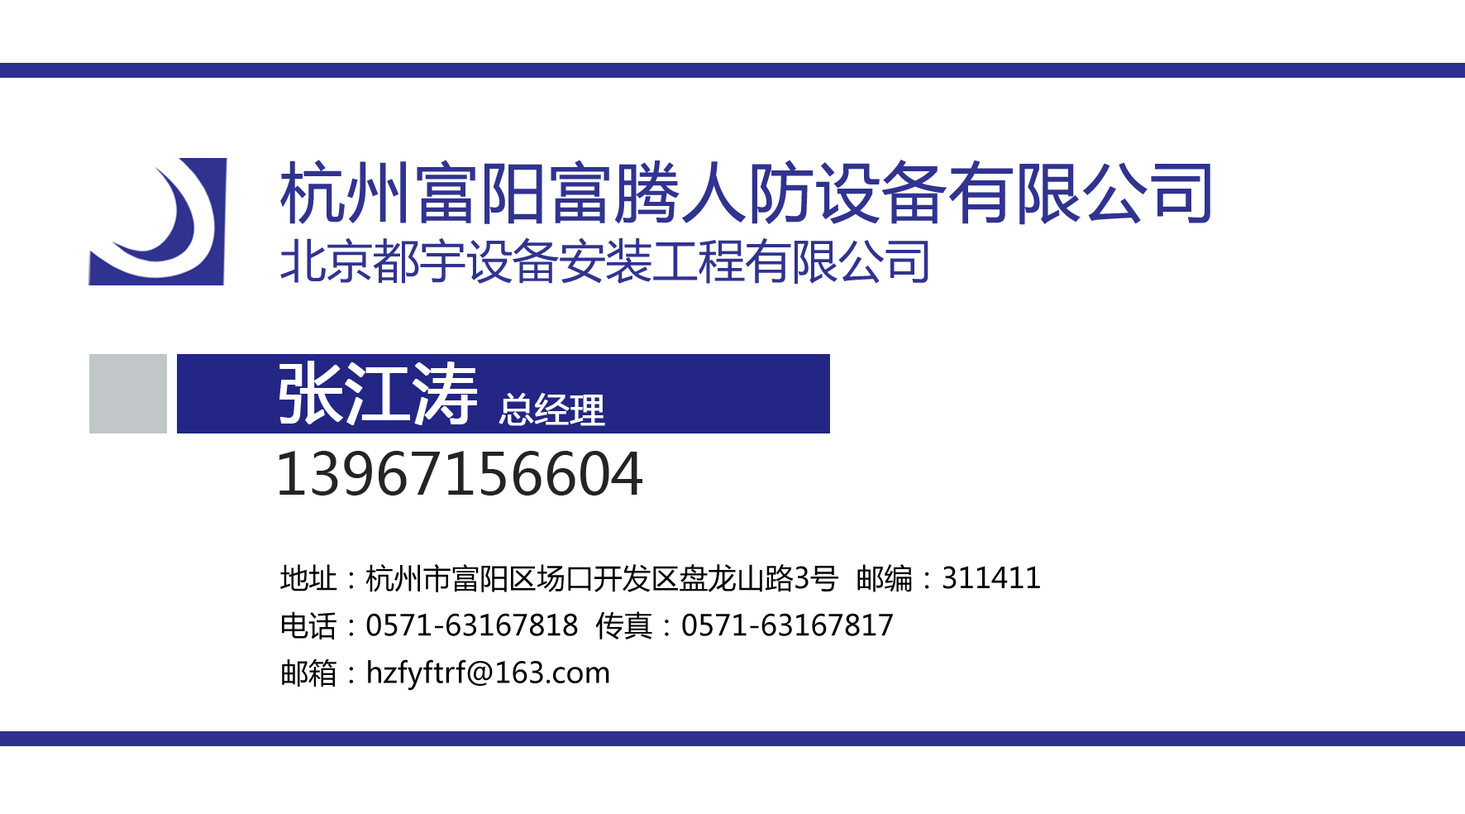
<style>
.page{position:relative;width:1465px;height:814px;background:#ffffff}
.page>*{position:absolute;margin:0}
.t1{font:65.2px/62.1px "MicrosoftYaHei";color:#30338f;font-weight:bold}
.t2{font:46.5px/62.1px "MicrosoftYaHei";color:#30338f}
.t3{font:65.5px "MicrosoftYaHei";color:#ffffff;font-weight:bold}
.t4{font:34.5px "MicrosoftYaHei";color:#ffffff;font-weight:bold}
.t5{font:57.4px "MicrosoftYaHei";color:#242424}
.t6{font:28.5px/47.4px "MicrosoftYaHei";color:#000000}
</style>
<div class="page">
<p class="t1" style="left:280px;top:160px;width:931px;height:124px">杭州富阳富腾人防设备有限公司<br><span class="t2">北京都宇设备安装工程有限公司</span></p>
<p class="t3" style="left:280px;top:361px;width:198px;height:64px">张江涛</p>
<p class="t4" style="left:499px;top:393px;width:106px;height:33px">总经理</p>
<p class="t5" style="left:280px;top:451px;width:363px;height:44px">13967156604</p>
<p class="t6" style="left:280px;top:564px;width:760px;height:127px">地址：杭州市富阳区场口开发区盘龙山路3号  邮编：311411<br>电话：0571-63167818  传真：0571-63167817<br>邮箱：hzfyftrf@163.com</p>
</div>
